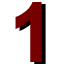
<style>
.page{position:relative;width:64px;height:64px;background:#ffffff}
.page>*{position:absolute;margin:0}
.t1{font:83.3px "Arial-BoldMT";color:#760000}
</style>
<div class="page">
<p class="t1" style="left:15px;top:2px;width:27px;height:60px">1</p>
</div>
